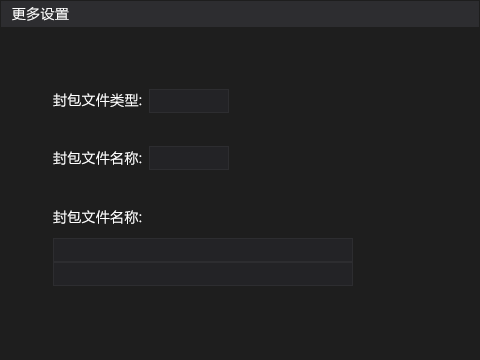
<style>
.page{position:relative;width:480px;height:360px;background:#1e1e1e}
.page>*{position:absolute;margin:0}
.t1{font:14px "MicrosoftYaHei";letter-spacing:0.02em;color:#ffffff}
</style>
<div class="page">
<p class="t1" style="left:12px;top:7px;width:57px;height:14px">更多设置</p>
<p class="t1" style="left:53px;top:93px;width:89px;height:14px">封包文件类型:</p>
<p class="t1" style="left:53px;top:151px;width:89px;height:14px">封包文件名称:</p>
<p class="t1" style="left:53px;top:210px;width:89px;height:14px">封包文件名称:</p>
</div>
